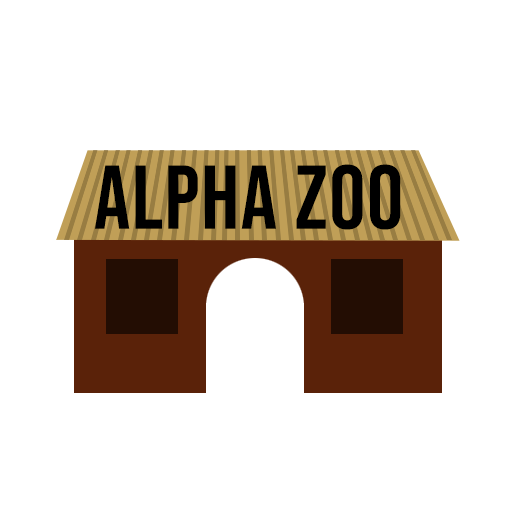
<style>
.page{position:relative;width:512px;height:512px;background:#ffffff}
.page>*{position:absolute;margin:0}
.t1{font:90px "BebasNeue-Regular";letter-spacing:0.02em;color:#000000}
</style>
<div class="page">
<p class="t1" style="left:95px;top:164px;width:306px;height:66px">ALPHA ZOO</p>
</div>
